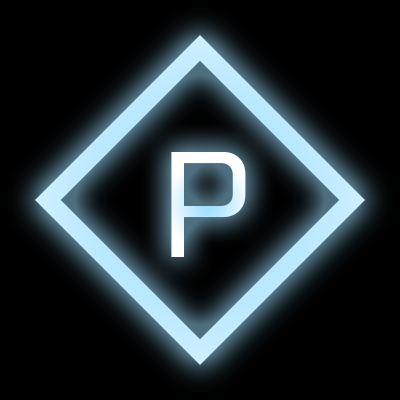
<style>
.page{position:relative;width:400px;height:400px;background:#000000}
.page>*{position:absolute;margin:0}
.t1{font:150px "Purista";color:#ffffff}
</style>
<div class="page">
<p class="t1" style="left:171px;top:152px;width:75px;height:105px">P</p>
</div>
